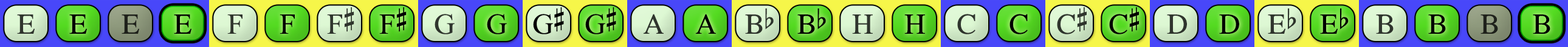
<style>
.page{position:relative;width:1568px;height:47px}
.page>*{position:absolute;margin:0}
.t1{font:29.2px "OpusChords";color:#30362e}
.t2{font:29.2px "OpusChords";color:#000000}
.t3{font:29.2px "OpusChords";color:#1f211b}
.t4{font:29.2px "OpusChords";color:#30352d}
.t5{font:29.2px "OpusChords";color:#2f352d}
.t6{font:29.2px "OpusChords";letter-spacing:-0.025em;color:#000000}
</style>
<div class="page">
<p class="t1" style="left:17px;top:15px;width:18px;height:19px">E</p>
<p class="t2" style="left:69px;top:15px;width:18px;height:19px">E</p>
<p class="t3" style="left:122px;top:15px;width:17px;height:19px">E</p>
<p class="t2" style="left:174px;top:15px;width:17px;height:19px">E</p>
<p class="t1" style="left:227px;top:15px;width:15px;height:19px">F</p>
<p class="t2" style="left:280px;top:15px;width:15px;height:19px">F</p>
<p class="t4" style="left:327px;top:7px;width:27px;height:27px">F#</p>
<p class="t2" style="left:379px;top:7px;width:28px;height:27px">F#</p>
<p class="t5" style="left:435px;top:14px;width:20px;height:21px">G</p>
<p class="t2" style="left:487px;top:14px;width:20px;height:21px">G</p>
<p class="t6" style="left:533px;top:7px;width:31px;height:28px">G#</p>
<p class="t6" style="left:585px;top:7px;width:31px;height:28px">G#</p>
<p class="t5" style="left:643px;top:14px;width:21px;height:20px">A</p>
<p class="t2" style="left:695px;top:14px;width:21px;height:20px">A</p>
<p class="t4" style="left:745px;top:9px;width:29px;height:25px">Bb</p>
<p class="t2" style="left:797px;top:9px;width:29px;height:25px">Bb</p>
<p class="t4" style="left:852px;top:15px;width:21px;height:19px">H</p>
<p class="t2" style="left:904px;top:15px;width:21px;height:19px">H</p>
<p class="t1" style="left:957px;top:14px;width:18px;height:21px">C</p>
<p class="t2" style="left:1009px;top:14px;width:19px;height:21px">C</p>
<p class="t5" style="left:1057px;top:7px;width:30px;height:28px">C#</p>
<p class="t2" style="left:1109px;top:7px;width:30px;height:28px">C#</p>
<p class="t5" style="left:1167px;top:15px;width:20px;height:19px">D</p>
<p class="t2" style="left:1219px;top:15px;width:20px;height:19px">D</p>
<p class="t4" style="left:1268px;top:9px;width:28px;height:25px">Eb</p>
<p class="t2" style="left:1320px;top:9px;width:29px;height:25px">Eb</p>
<p class="t4" style="left:1376px;top:15px;width:18px;height:19px">B</p>
<p class="t2" style="left:1428px;top:15px;width:18px;height:19px">B</p>
<p class="t3" style="left:1480px;top:15px;width:18px;height:19px">B</p>
<p class="t2" style="left:1533px;top:15px;width:17px;height:19px">B</p>
</div>
